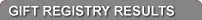
<style>
.page{position:relative;width:202px;height:20px;background:#858585}
.page>*{position:absolute;margin:0}
.t1{font:13.3px "Arial-BoldMT";color:#ffffff}
</style>
<div class="page">
<p class="t1" style="left:9px;top:5px;width:165px;height:11px">GIFT REGISTRY RESULTS</p>
</div>
